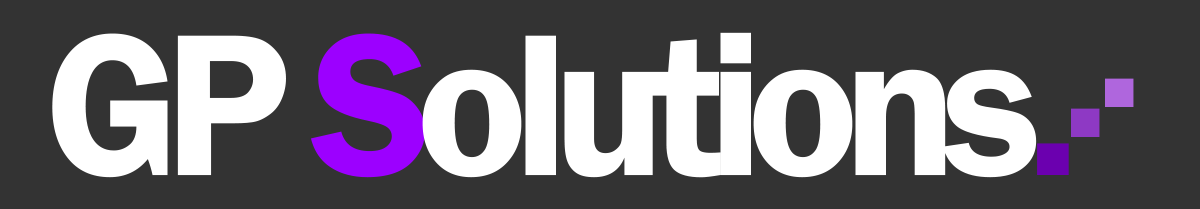
<style>
.page{position:relative;width:1200px;height:209px;background:#333333}
.page>*{position:absolute;margin:0}
.t1{font:208.6px "FranklinGothic-Demi";letter-spacing:-0.075em;color:#ffffff}
.t2{font:208.6px "FranklinGothic-Demi";letter-spacing:-0.075em;color:#9c00ff}
.t3{font:208.6px "FranklinGothic-Demi";letter-spacing:-0.075em;color:#6b00af}
.t4{font:187.7px "FranklinGothic-Demi";letter-spacing:-0.075em;color:#af66dd}
.t5{font:187.7px "FranklinGothic-Demi";letter-spacing:-0.075em;color:#8e39c4}
</style>
<div class="page">
<p class="t1" style="left:52px;top:32px;width:1017px;height:146px">GP <span class="t2">S</span>olutions<span class="t3">.</span></p>
<p class="t4" style="left:1105px;top:78px;width:29px;height:29px">.</p>
<p class="t5" style="left:1071px;top:108px;width:29px;height:29px">.</p>
</div>
